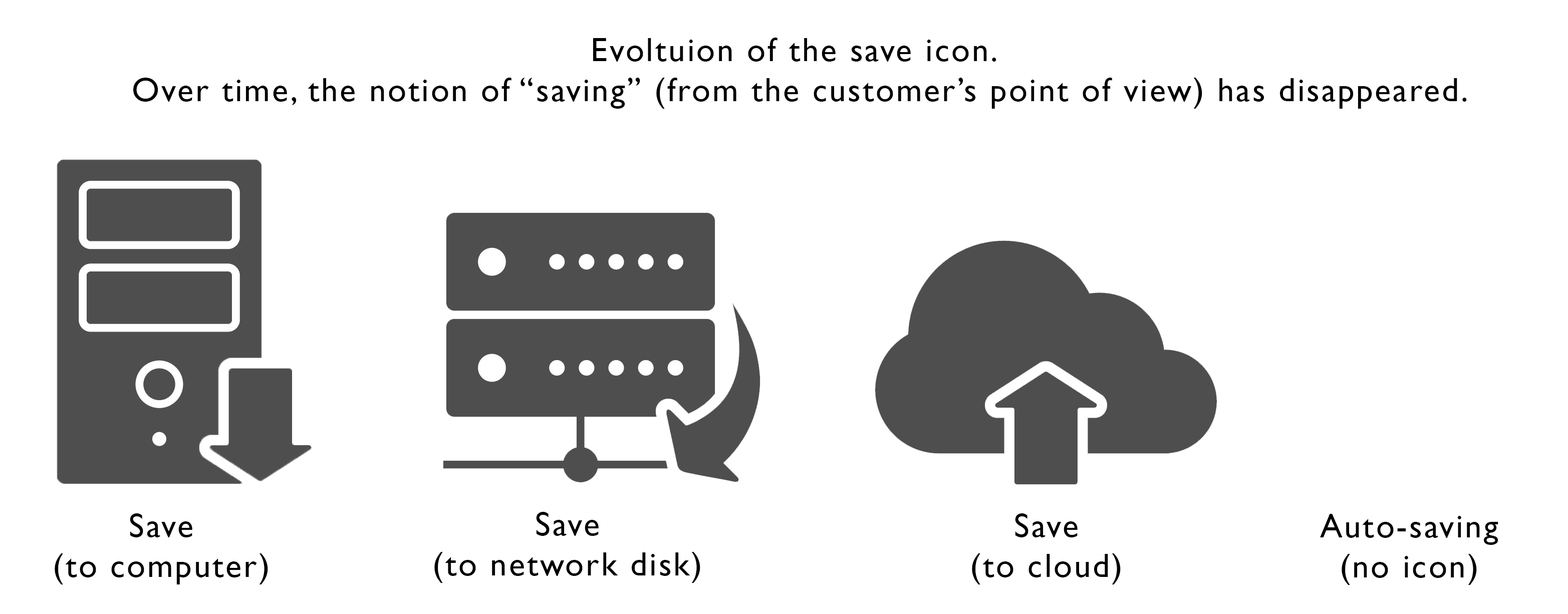
<style>
.page{position:relative;width:1568px;height:614px;background:#ffffff}
.page>*{position:absolute;margin:0}
.t1{font:33.4px "GillSans";letter-spacing:0.06em;color:#000000}
</style>
<div class="page">
<p class="t1" style="left:133px;top:38px;width:1334px;height:71px;text-align:center">Evoltuion of the save icon. <br>Over time, the notion of “saving” (from the customer’s point of view) has disappeared.</p>
<p class="t1" style="left:55px;top:513px;width:213px;height:72px;text-align:center">Save<br>(to computer)</p>
<p class="t1" style="left:434px;top:512px;width:266px;height:71px;text-align:center">Save<br>(to network disk)</p>
<p class="t1" style="left:972px;top:513px;width:149px;height:72px;text-align:center">Save<br>(to cloud)</p>
<p class="t1" style="left:1320px;top:514px;width:178px;height:71px;text-align:center">Auto-saving<br>(no icon)</p>
</div>
